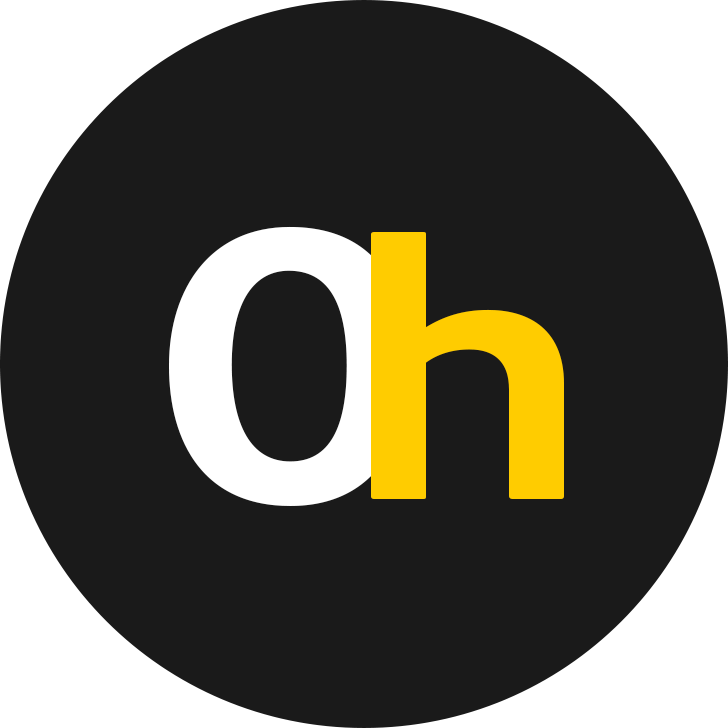
<style>
.page{position:relative;width:728px;height:728px;background:#1a1a1a}
.page>*{position:absolute;margin:0}
.t1{font:428.5px "AdobeClean-Bold";color:#ffffff;scale:1.21 1}
.t2{font:375.2px "AdobeClean-Bold";color:#ffcc00;scale:1.21 1}
</style>
<div class="page">
<p class="t1" style="left:169px;top:226px;width:240px;height:280px">0</p>
<p class="t2" style="left:371px;top:232px;width:193px;height:267px">h</p>
</div>
